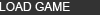
<style>
.page{position:relative;width:100px;height:15px;background:#333333}
.page>*{position:absolute;margin:0}
.t1{font:12px "HalfLife";color:#ffffff}
</style>
<div class="page">
<p class="t1" style="left:0px;top:2px;width:70px;height:9px">LOAD GAME</p>
</div>
